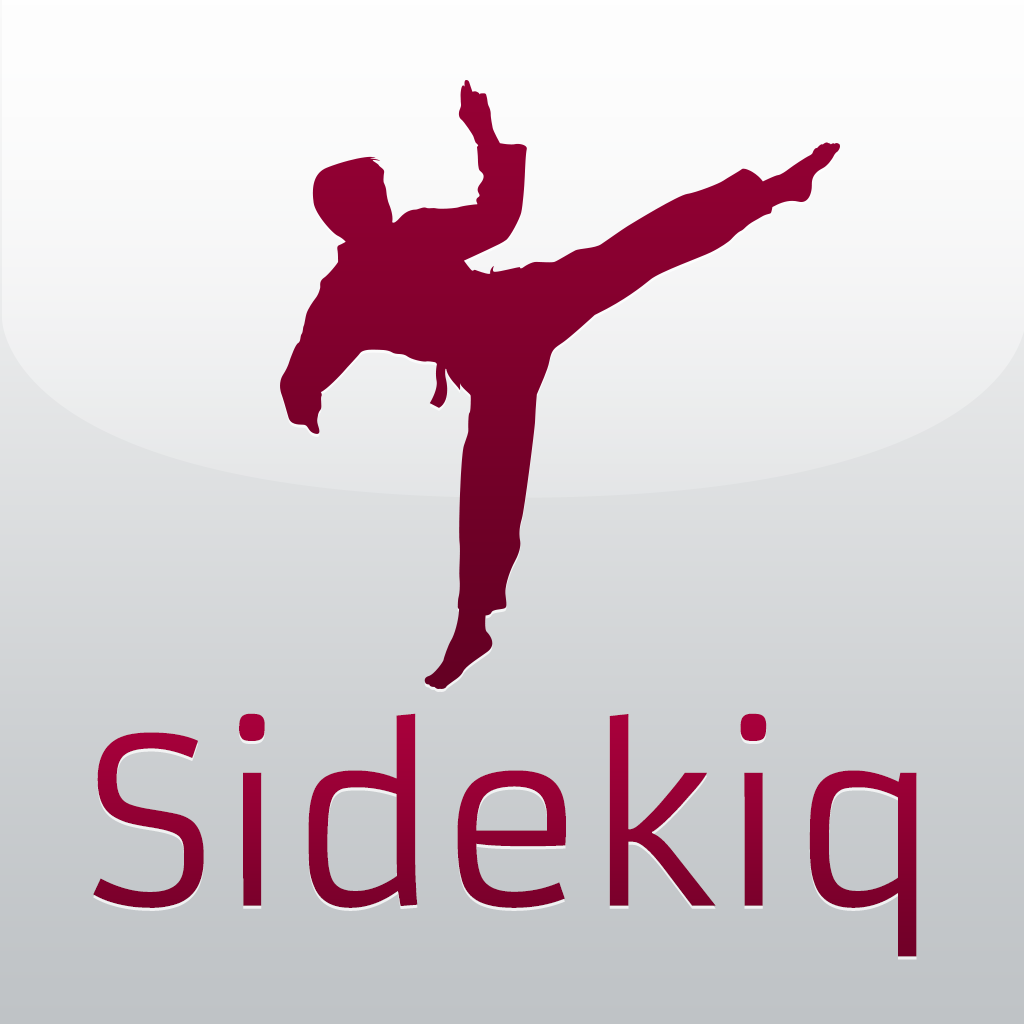
<style>
.page{position:relative;width:1024px;height:1024px}
.page>*{position:absolute;margin:0}
.t1{font:228.4px "Armata-Regular";letter-spacing:-0.01em;color:#8e0032}
</style>
<div class="page">
<p class="t1" style="left:93px;top:713px;width:824px;height:244px">Sidekiq</p>
</div>
